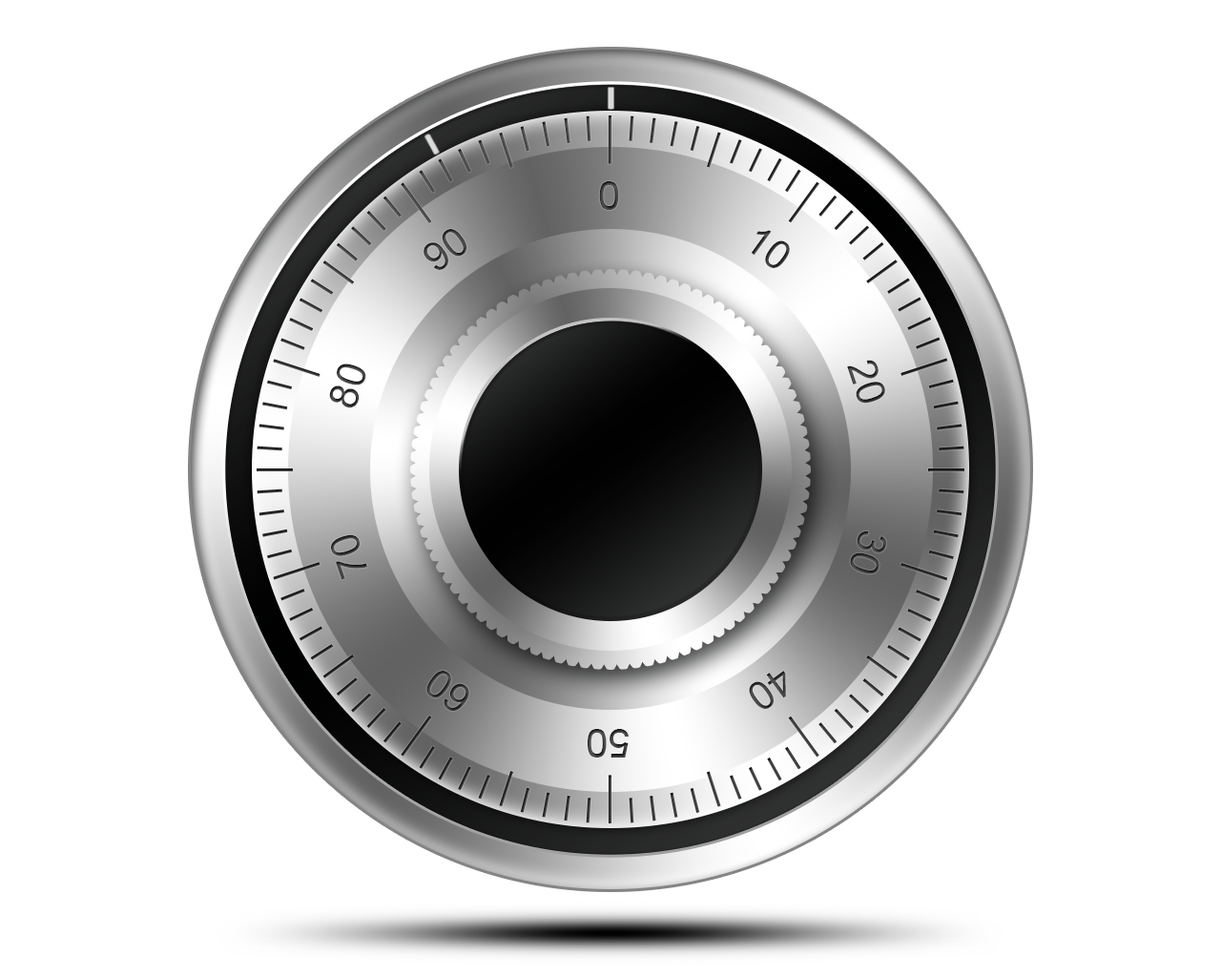
<style>
.page{position:relative;width:1221px;height:977px;background:#ffffff}
.page>*{position:absolute;margin:0}
.t1{font:40.1px "ArialMT";color:#424242}
.t2{font:40.1px "ArialMT";color:#404040}
.t3{font:40.1px "ArialMT"}
.t4{font:40.1px "ArialMT";color:#383838}
.t5{font:40.1px "ArialMT";color:#555555}
</style>
<div class="page">
<p class="t1" style="left:599px;top:181px;width:20px;height:29px">0</p>
<p class="t2" style="left:423px;top:229px;width:44px;height:41px;rotate:-36deg">90</p>
<p class="t3" style="left:751px;top:230px;width:39px;height:38px;rotate:36deg">10</p>
<p class="t3" style="left:329px;top:363px;width:37px;height:45px;rotate:-72deg">80</p>
<p class="t3" style="left:847px;top:360px;width:38px;height:43px;rotate:71deg">20</p>
<p class="t4" style="left:850px;top:530px;width:36px;height:44px;rotate:108deg">30</p>
<p class="t3" style="left:331px;top:534px;width:36px;height:46px;rotate:-109deg">70</p>
<p class="t3" style="left:426px;top:671px;width:43px;height:41px;rotate:-144deg">60</p>
<p class="t5" style="left:749px;top:671px;width:37px;height:38px;rotate:144deg">40</p>
<p class="t3" style="left:588px;top:729px;width:41px;height:28px;rotate:180deg">50</p>
</div>
